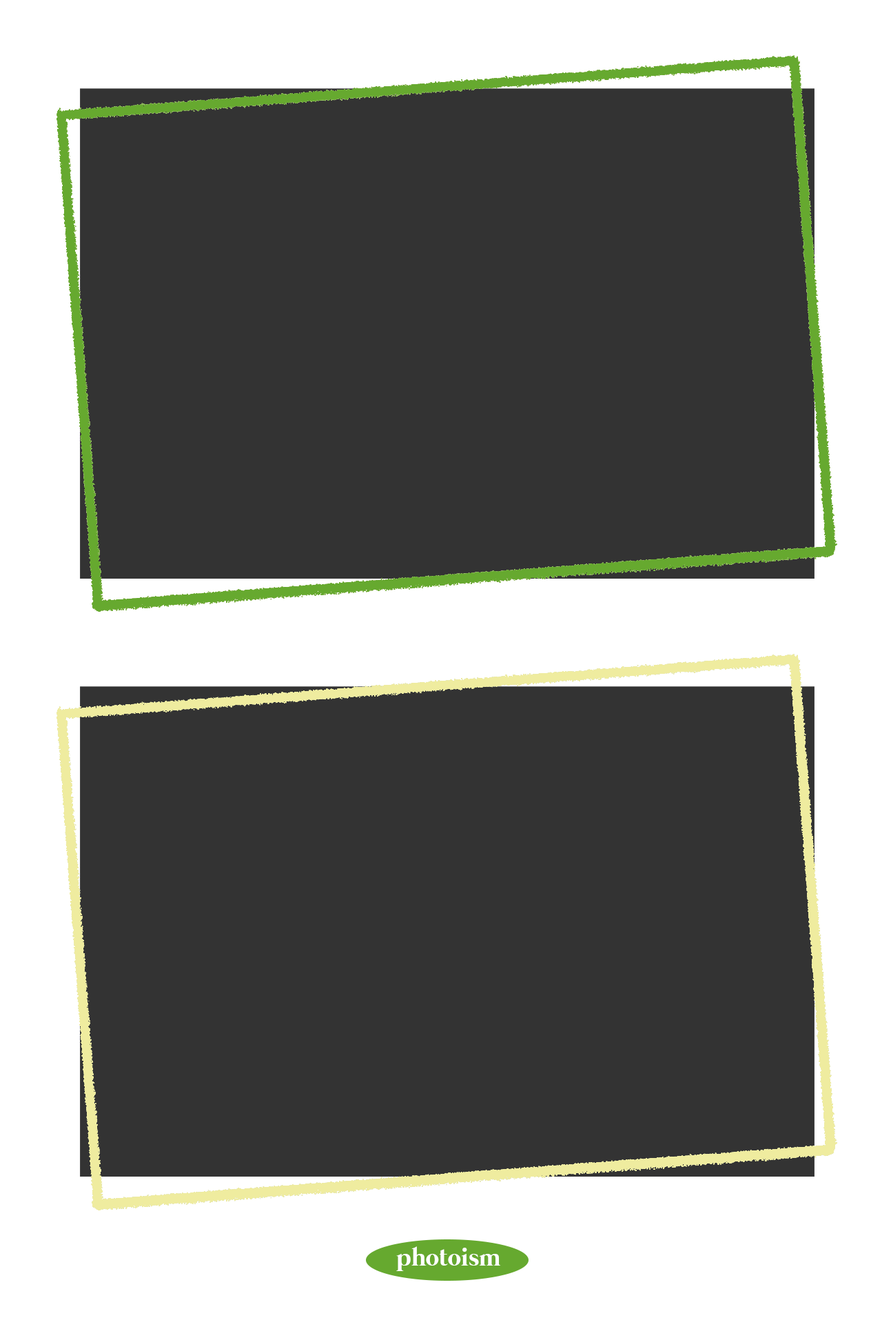
<style>
.page{position:relative;width:891px;height:1338px;background:#333333}
.page>*{position:absolute;margin:0}
.t1{font:25.9px "Mermaid-Bold";color:#ffffff}
</style>
<div class="page">
<p class="t1" style="left:396px;top:1246px;width:105px;height:25px">photoism</p>
</div>
